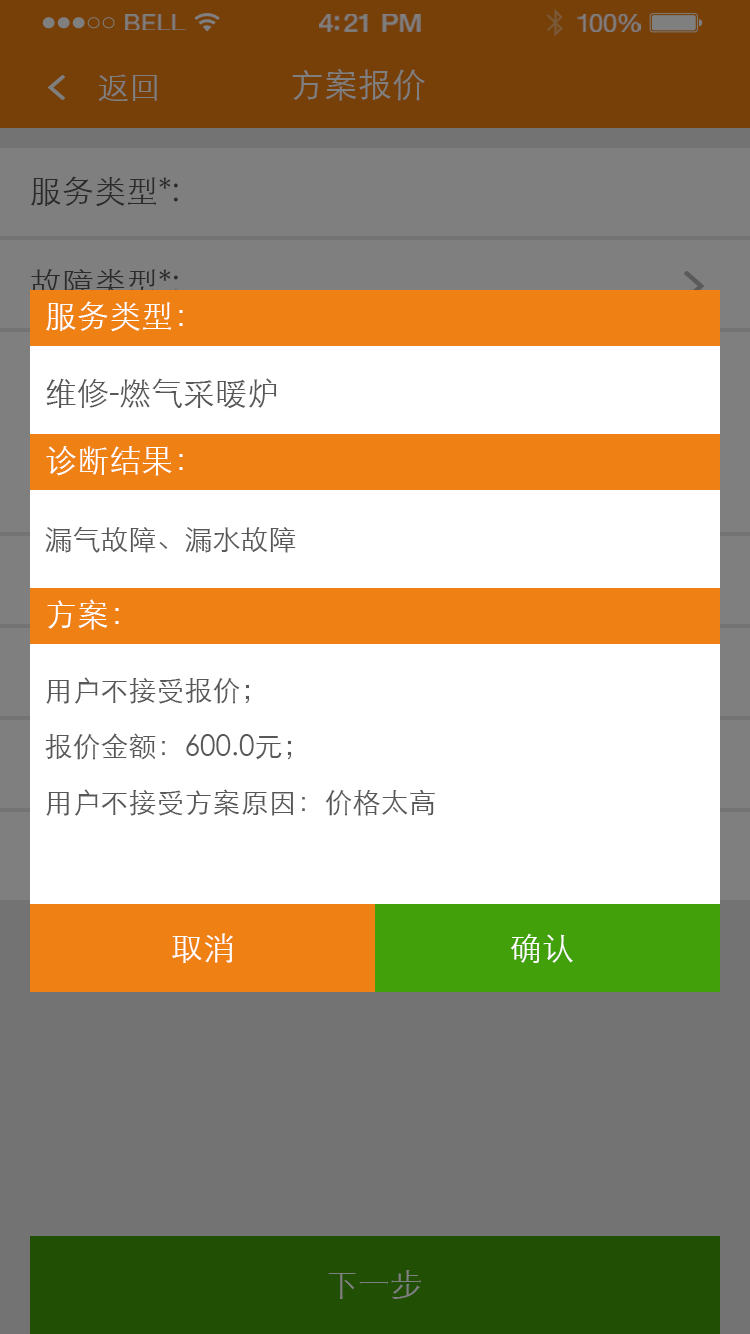
<style>
.page{position:relative;width:750px;height:1334px;background:#ffffff}
.page>*{position:absolute;margin:0}
.t1{font:23.3px "HelveticaNeue";letter-spacing:0.02em;color:#7f7f7f;scale:1.06 1}
.t2{font:25.3px "HelveticaNeue-Medium";letter-spacing:-0.02em;color:#7f7f7f;scale:1.06 1}
.t3{font:24.3px "HelveticaNeue";letter-spacing:-0.02em;color:#7f7f7f;scale:1.06 1}
.t4{font:32px "STXihei";color:#7f7f7f}
.t5{font:34px "STXihei";color:#7f7f7f}
.t6{font:32px "STXihei";color:#2c2b2b}
.t7{font:32px "STXihei";color:#ffffff}
.t8{font:32px "STXihei";color:#595757}
.t9{font:28px "STXihei";color:#595757}
.t10{font:28px/56px "STXihei";color:#595757}
</style>
<div class="page">
<p class="t1" style="left:125px;top:14px;width:61px;height:16px">BELL</p>
<p class="t2" style="left:319px;top:14px;width:102px;height:18px">4:21 PM</p>
<p class="t3" style="left:577px;top:14px;width:64px;height:18px">100%</p>
<p class="t4" style="left:98px;top:74px;width:59px;height:27px">返回</p>
<p class="t5" style="left:292px;top:69px;width:133px;height:32px">方案报价</p>
<p class="t6" style="left:31px;top:176px;width:147px;height:31px">服务类型*:</p>
<p class="t6" style="left:31px;top:269px;width:147px;height:30px">故障类型*:</p>
<p class="t7" style="left:46px;top:301px;width:137px;height:31px">服务类型：</p>
<p class="t8" style="left:46px;top:378px;width:231px;height:31px">维修-燃气采暖炉</p>
<p class="t7" style="left:46px;top:446px;width:137px;height:30px">诊断结果：</p>
<p class="t9" style="left:45px;top:526px;width:251px;height:27px">漏气故障、漏水故障</p>
<p class="t7" style="left:47px;top:599px;width:72px;height:31px">方案：</p>
<p class="t10" style="left:45px;top:677px;width:390px;height:139px">用户不接受报价；<br>报价金额：600.0元；<br>用户不接受方案原因：价格太高</p>
<p class="t7" style="left:172px;top:933px;width:61px;height:30px">取消</p>
<p class="t7" style="left:510px;top:933px;width:63px;height:30px">确认</p>
<p class="t4" style="left:328px;top:1270px;width:93px;height:29px">下一步</p>
</div>
